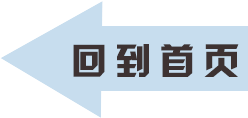
<style>
.page{position:relative;width:248px;height:118px;background:#ffffff}
.page>*{position:absolute;margin:0}
.t1{font:36px "HYk2gj";letter-spacing:0.2em;color:#3d3232;text-transform:uppercase;font-weight:bold}
</style>
<div class="page">
<p class="t1" style="left:73px;top:44px;width:166px;height:33px">回到首页</p>
</div>
